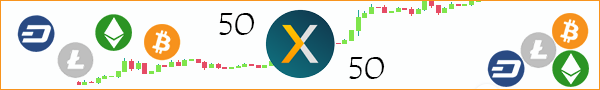
<style>
.page{position:relative;width:600px;height:90px;background:#fdfefe}
.page>*{position:absolute;margin:0}
.t1{font:32px "TempusSansITC";color:#000000}
</style>
<div class="page">
<p class="t1" style="left:219px;top:13px;width:36px;height:22px">50</p>
<p class="t1" style="left:349px;top:57px;width:36px;height:22px">50</p>
</div>
